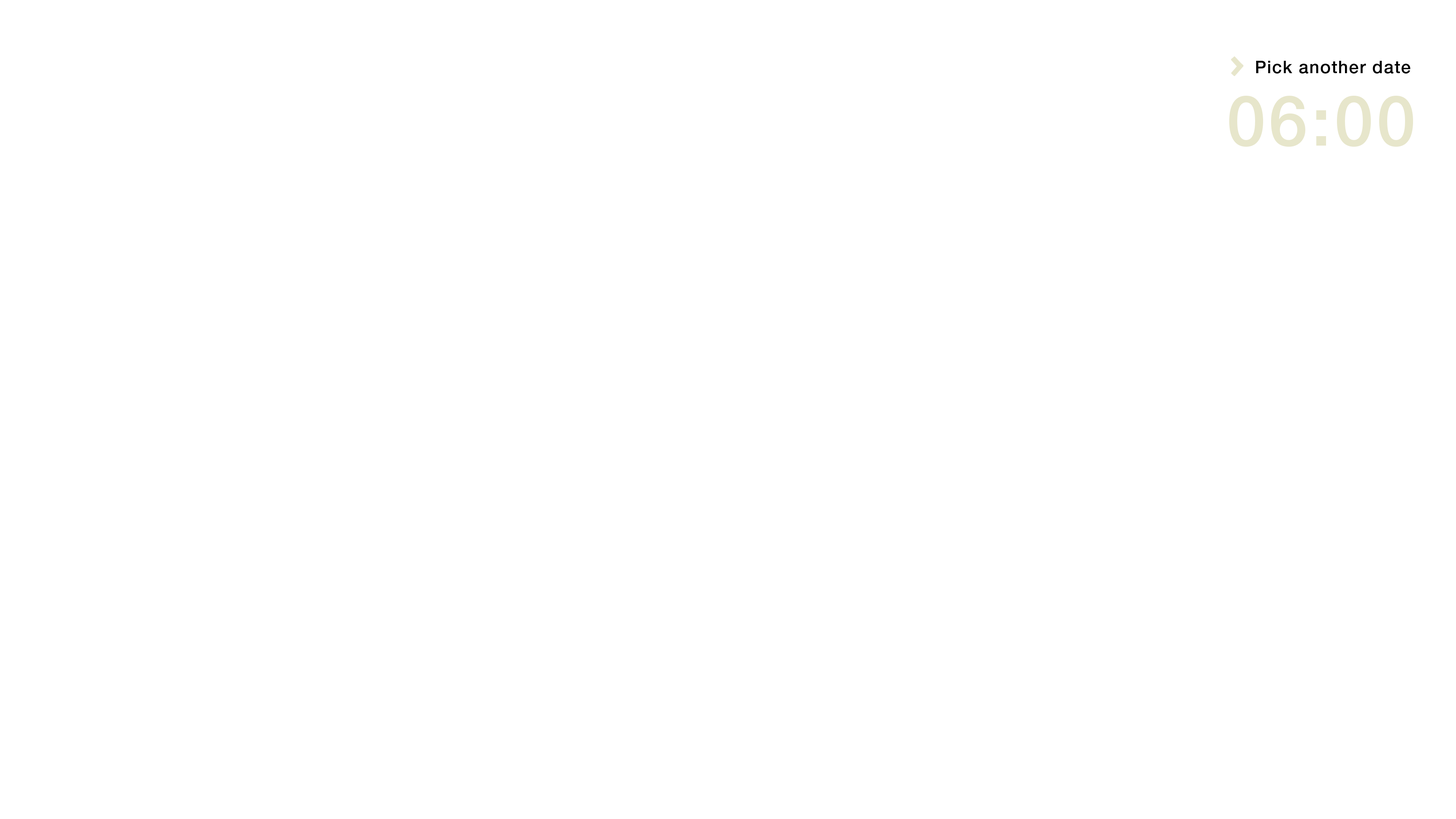
<style>
.page{position:relative;width:1456px;height:819px;background:#ffffff}
.page>*{position:absolute;margin:0}
.t1{font:17.4px "HelveticaNeueLTStd-Md";letter-spacing:0.05em;color:#000000}
.t2{font:70px "HelveticaNeueLTStd-Md";letter-spacing:0.05em;color:#e7e6cb}
</style>
<div class="page">
<p class="t1" style="left:1256px;top:61px;width:154px;height:13px">Pick another date</p>
<p class="t2" style="left:1229px;top:96px;width:184px;height:51px">06:00</p>
</div>
